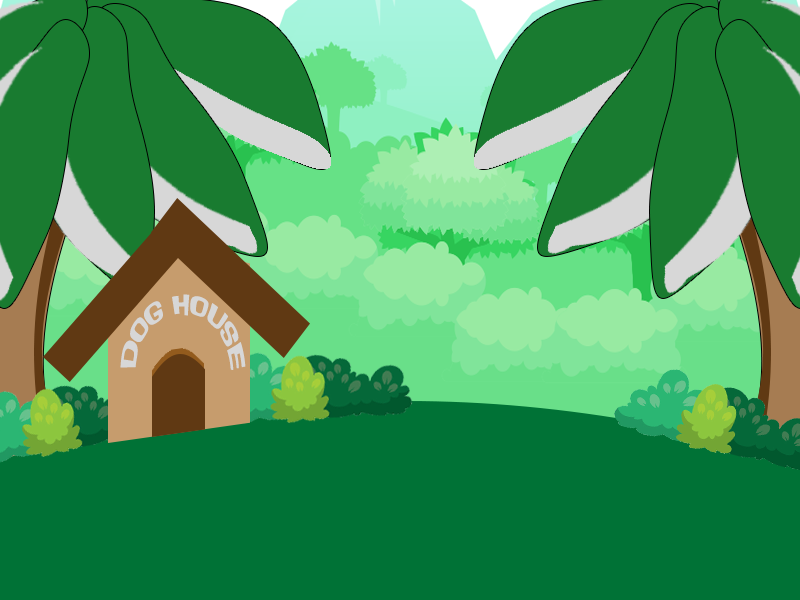
<style>
.page{position:relative;width:800px;height:600px;background:#007236}
.page>*{position:absolute;margin:0}
.t1{font:28px "InsideOut";color:#d7d7d7;scale:0.76 1}
</style>
<div class="page">
<p class="t1" style="left:120px;top:294px;width:126px;height:76px;text-align:center">dog House</p>
</div>
